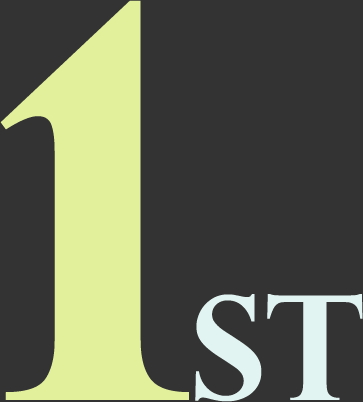
<style>
.page{position:relative;width:363px;height:402px;background:#333333}
.page>*{position:absolute;margin:0}
.t1{font:145.3px "PerpetuaTitlingMT-Bold";color:#e2ef9b}
.t2{font:549.1px "PerpetuaTitlingMT-Bold";color:#e2ef9b}
</style>
<div class="page">
<p class="t1" style="left:0px;top:0px;width:363px;height:402px"><span class="t2">1</span>st</p>
</div>
